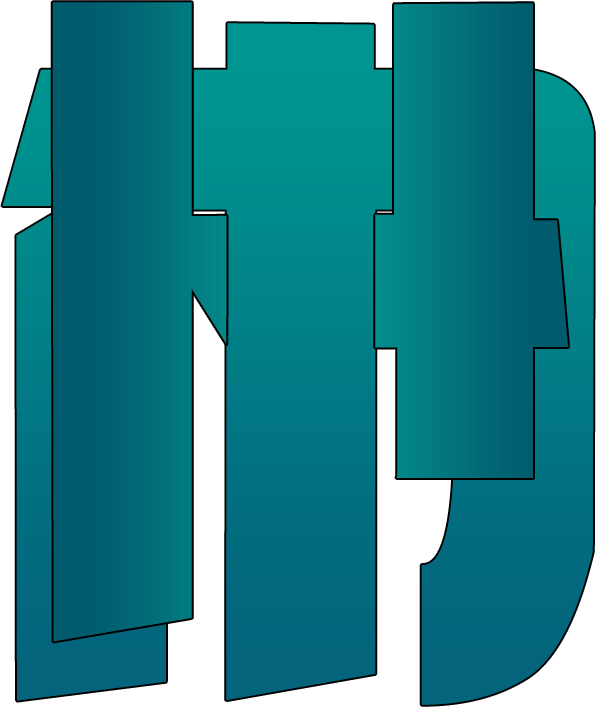
<style>
.page{position:relative;width:596px;height:707px}
.page>*{position:absolute;margin:0}
.t1{font:943.4px "GangofThree";color:#016d7e;text-transform:uppercase}
</style>
<div class="page">
<p class="t1" style="left:2px;top:23px;width:592px;height:682px">m</p>
</div>
